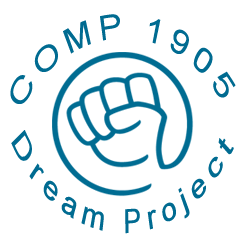
<style>
.page{position:relative;width:250px;height:250px;background:#ffffff}
.page>*{position:absolute;margin:0}
.t1{font:33.7px/56.2px "ArialMT";letter-spacing:0.2em;color:#006b91;scale:0.77 1}
.t2{font:32.5px/38.5px "ArialMT";letter-spacing:0.2em;color:#006b91;scale:0.67 1}
</style>
<div class="page">
<p class="t1" style="left:10px;top:14px;width:226px;height:90px">COMP 1905</p>
<p class="t2" style="left:11px;top:130px;width:223px;height:104px">Dream Project</p>
</div>
